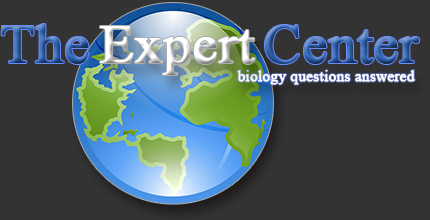
<style>
.page{position:relative;width:430px;height:220px;background:#333333}
.page>*{position:absolute;margin:0}
.t1{font:55px "TimesNewRomanPSMT";font-weight:bold}
.t2{font:15px "TimesNewRomanPSMT";color:#ffffff;font-weight:bold}
</style>
<div class="page">
<p class="t1" style="left:1px;top:24px;width:88px;height:40px">The</p>
<p class="t1" style="left:100px;top:26px;width:155px;height:49px">Expert</p>
<p class="t1" style="left:265px;top:25px;width:155px;height:39px">Center</p>
<p class="t2" style="left:237px;top:70px;width:178px;height:15px">biology questions answered</p>
</div>
